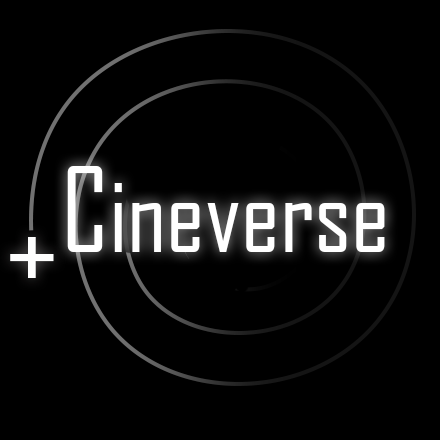
<style>
.page{position:relative;width:440px;height:440px;background:#000000}
.page>*{position:absolute;margin:0}
.t1{font:103.8px "AgencyFB-Reg";color:#ffffff}
.t2{font:111.7px "AgencyFB-Reg";color:#ffffff}
.t3{font:125.9px "AgencyFB-Reg";color:#fefefe}
</style>
<div class="page">
<p class="t1" style="left:67px;top:166px;width:318px;height:86px"><span class="t2">C</span>ineverse</p>
<p class="t3" style="left:10px;top:237px;width:44px;height:41px">+</p>
</div>
